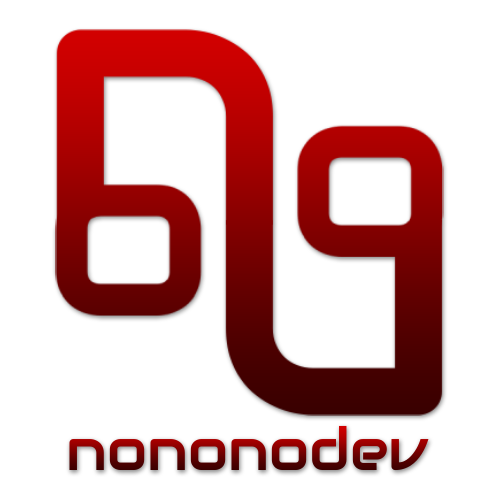
<style>
.page{position:relative;width:500px;height:500px;background:#ffffff}
.page>*{position:absolute;margin:0}
.t1{font:58.6px "Audiowide-Regular"}
</style>
<div class="page">
<p class="t1" style="left:69px;top:425px;width:360px;height:46px">nononodev</p>
</div>
